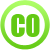
<style>
.page{position:relative;width:50px;height:50px;background:#ffffff}
.page>*{position:absolute;margin:0}
.t1{font:28px "Impact";letter-spacing:-0.017em;color:#63c914}
</style>
<div class="page">
<p class="t1" style="left:11px;top:14px;width:29px;height:23px">CO</p>
</div>
